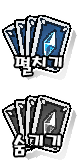
<style>
.page{position:relative;width:77px;height:160px;background:#ffffff}
.page>*{position:absolute;margin:0}
.t1{font:20.9px "MagicR-HM";color:#fefefe}
.t2{font:22.9px "MagicR-HM";color:#fefefe}
</style>
<div class="page">
<p class="t1" style="left:15px;top:56px;width:47px;height:20px">펼치기</p>
<p class="t2" style="left:14px;top:134px;width:47px;height:22px">숨기기</p>
</div>
